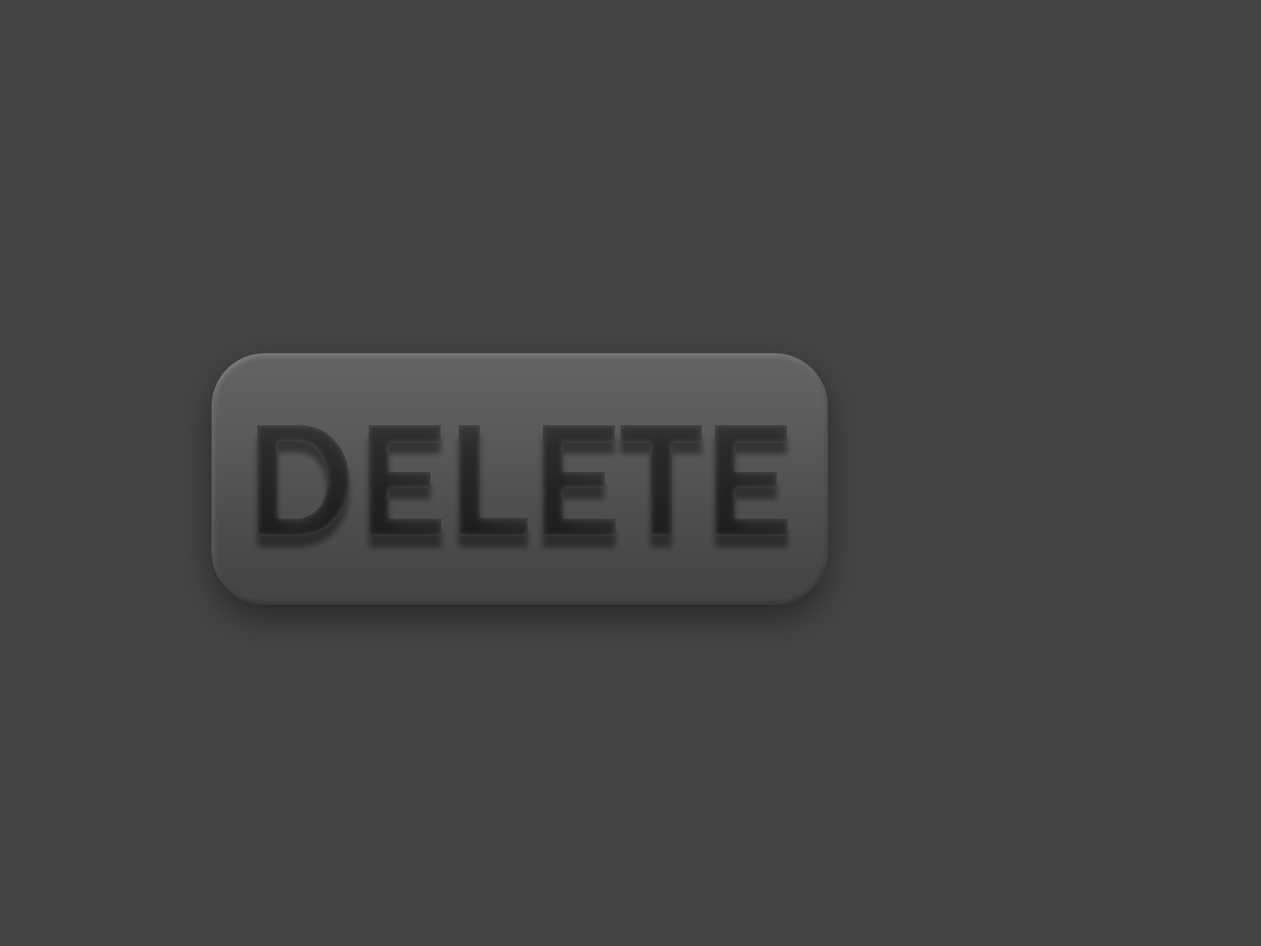
<style>
.page{position:relative;width:1261px;height:946px;background:#444444}
.page>*{position:absolute;margin:0}
.t1{font:166.3px "FranklinGothic-Medium";color:#2d2c2c}
</style>
<div class="page">
<p class="t1" style="left:257px;top:425px;width:531px;height:111px">DELETE</p>
</div>
